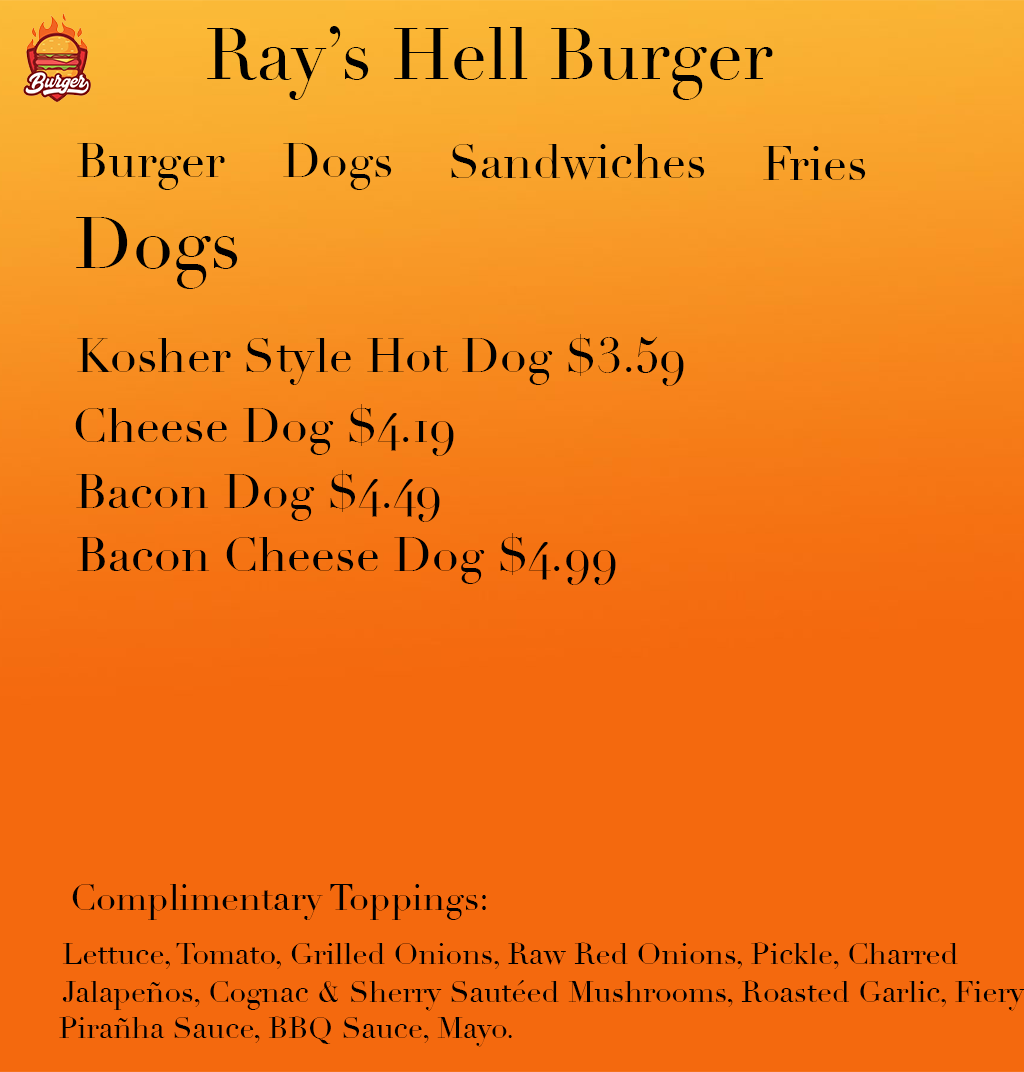
<style>
.page{position:relative;width:1024px;height:1072px;background:#f4690e}
.page>*{position:absolute;margin:0}
.t1{font:72px "Didot";color:#000000}
.t2{font:48px "Didot";color:#000000}
.t3{font:36px "Didot";color:#000000}
.t4{font:30px "Didot";color:#000000}
</style>
<div class="page">
<p class="t1" style="left:207px;top:26px;width:566px;height:74px">Ray’s Hell Burger</p>
<p class="t2" style="left:77px;top:143px;width:148px;height:47px">Burger</p>
<p class="t2" style="left:283px;top:143px;width:109px;height:47px">Dogs</p>
<p class="t2" style="left:451px;top:144px;width:254px;height:36px">Sandwiches</p>
<p class="t2" style="left:763px;top:146px;width:103px;height:34px">Fries</p>
<p class="t1" style="left:76px;top:217px;width:162px;height:72px">Dogs</p>
<p class="t2" style="left:77px;top:334px;width:607px;height:52px">Kosher Style Hot Dog $3.59</p>
<p class="t2" style="left:75px;top:404px;width:379px;height:52px">Cheese Dog $4.19</p>
<p class="t2" style="left:76px;top:470px;width:364px;height:52px">Bacon Dog $4.49</p>
<p class="t2" style="left:77px;top:533px;width:539px;height:52px">Bacon Cheese Dog $4.99</p>
<p class="t3" style="left:72px;top:884px;width:414px;height:36px">Complimentary Toppings:</p>
<p class="t4" style="left:62px;top:942px;width:896px;height:27px">Lettuce, Tomato, Grilled Onions, Raw Red Onions, Pickle, Charred</p>
<p class="t4" style="left:62px;top:980px;width:963px;height:31px">Jalapeños, Cognac &amp; Sherry Sautéed Mushrooms, Roasted Garlic, Fiery</p>
<p class="t4" style="left:59px;top:1016px;width:453px;height:31px">Pirañha Sauce, BBQ Sauce, Mayo.</p>
</div>
